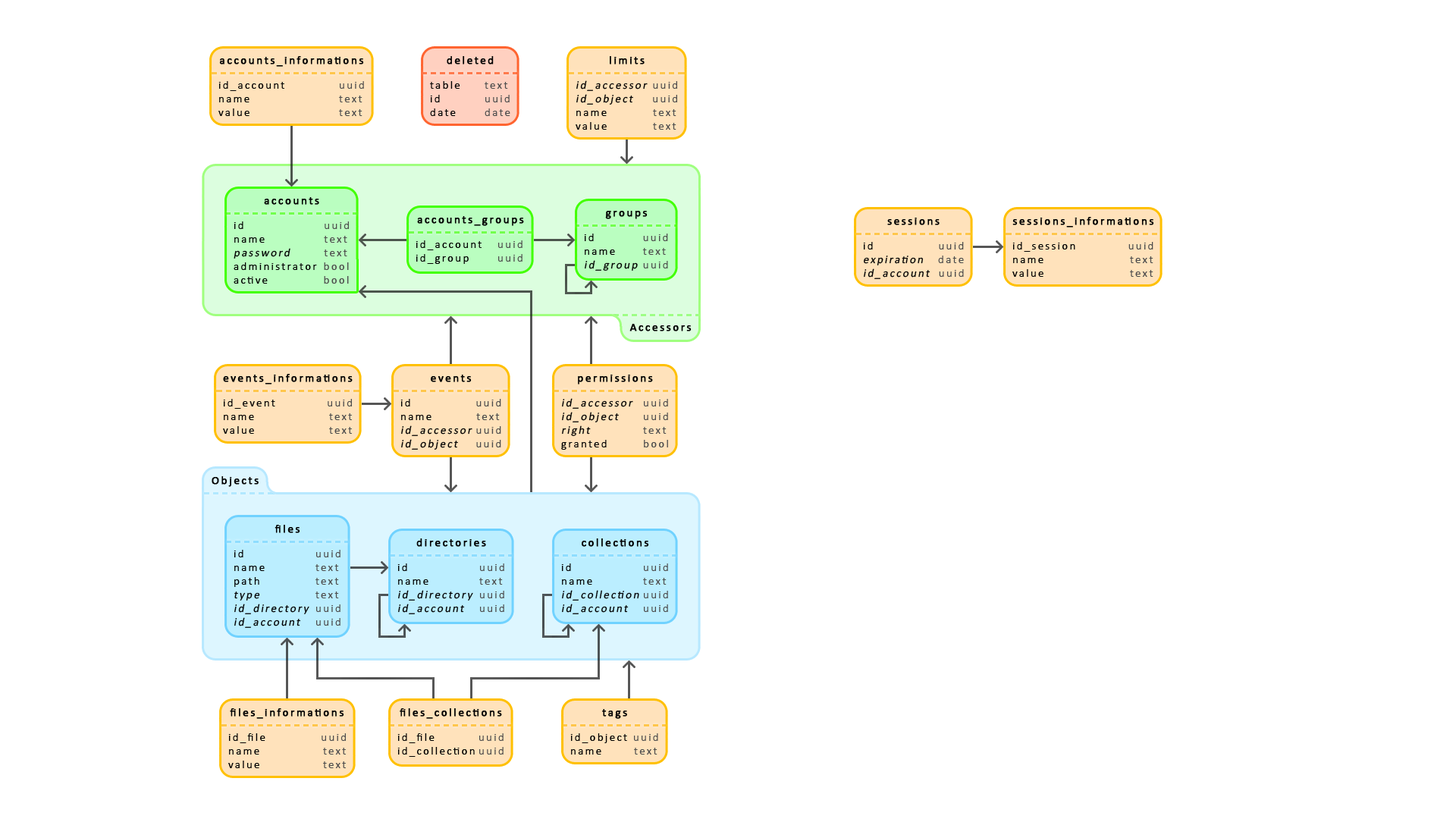
<style>
.page{position:relative;width:1456px;height:819px;background:#ffffff}
.page>*{position:absolute;margin:0}
.t1{font:11.4px "Calibri";letter-spacing:0.15em;color:#000000;font-weight:bold}
.t2{font:11.4px "Calibri";letter-spacing:0.15em;color:#000000}
.t3{font:11.4px "Calibri";letter-spacing:0.15em;color:#4d4d4d}
.t4{font:11.4px "Calibri";letter-spacing:0.15em;color:#000000;font-style:italic}
</style>
<div class="page">
<p class="t1" style="left:219px;top:56px;width:145px;height:11px">accounts_informations</p>
<p class="t1" style="left:447px;top:56px;width:47px;height:8px">deleted</p>
<p class="t1" style="left:610px;top:56px;width:35px;height:8px">limits</p>
<p class="t2" style="left:218px;top:81px;width:146px;height:35px">id_account     <span class="t3">uuid<br></span>name      <span class="t3">text<br></span>value      <span class="t3">text</span></p>
<p class="t2" style="left:430px;top:81px;width:80px;height:35px">table <span class="t3">text<br></span>id  <span class="t3">uuid<br></span>date <span class="t3">date</span></p>
<p class="t4" style="left:576px;top:80px;width:101px;height:50px">id_accessor <span class="t3">uuid<br></span>id_object    <span class="t3">uuid<br></span><span class="t2">name       </span><span class="t3">text<br></span><span class="t2">value       </span><span class="t3">text</span></p>
<p class="t1" style="left:264px;top:197px;width:55px;height:8px">accounts</p>
<p class="t2" style="left:234px;top:221px;width:115px;height:63px">id     <span class="t3">uuid<br></span>name    <span class="t3">text<br></span><span class="t4">password   </span><span class="t3">text<br></span>administrator  <span class="t3">bool<br></span>active     <span class="t3">bool</span></p>
<p class="t1" style="left:417px;top:216px;width:107px;height:10px">accounts_groups</p>
<p class="t1" style="left:605px;top:211px;width:43px;height:8px">groups</p>
<p class="t1" style="left:887px;top:218px;width:53px;height:7px">sessions</p>
<p class="t1" style="left:1012px;top:217px;width:142px;height:10px">sessions_informations</p>
<p class="t4" style="left:584px;top:234px;width:84px;height:37px"><span class="t2">id   </span><span class="t3">uuid<br></span><span class="t2">name  </span><span class="t3">text<br></span>id_group <span class="t3">uuid</span></p>
<p class="t2" style="left:416px;top:240px;width:106px;height:24px">id_account <span class="t3">uuid<br></span>id_group <span class="t3">uuid</span></p>
<p class="t4" style="left:863px;top:242px;width:101px;height:37px"><span class="t2">id       </span><span class="t3">uuid<br></span>expiration    <span class="t3">date<br></span>id_account   <span class="t3">uuid</span></p>
<p class="t2" style="left:1012px;top:242px;width:141px;height:35px">id_session      <span class="t3">uuid<br></span>name            <span class="t3">text<br></span>value            <span class="t3">text</span></p>
<p class="t1" style="left:629px;top:324px;width:63px;height:7px">Accessors</p>
<p class="t1" style="left:223px;top:374px;width:130px;height:10px">events_informations</p>
<p class="t1" style="left:431px;top:375px;width:41px;height:7px">events</p>
<p class="t1" style="left:578px;top:375px;width:75px;height:9px">permissions</p>
<p class="t2" style="left:223px;top:399px;width:129px;height:35px">id_event        <span class="t3">uuid<br></span>name        <span class="t3">text<br></span>value        <span class="t3">text</span></p>
<p class="t4" style="left:400px;top:399px;width:101px;height:51px"><span class="t2">id       </span><span class="t3">uuid<br></span><span class="t2">name      </span><span class="t3">text<br></span>id_accessor <span class="t3">uuid<br></span>id_object    <span class="t3">uuid</span></p>
<p class="t4" style="left:561px;top:398px;width:107px;height:52px">id_accessor <span class="t3">uuid<br></span>id_object <span class="t3">uuid<br></span>right  <span class="t3">text<br></span><span class="t2">granted  </span><span class="t3">bool</span></p>
<p class="t1" style="left:212px;top:476px;width:47px;height:11px">Objects</p>
<p class="t1" style="left:275px;top:525px;width:25px;height:8px">files</p>
<p class="t1" style="left:416px;top:538px;width:70px;height:9px">directories</p>
<p class="t1" style="left:582px;top:538px;width:67px;height:9px">collections</p>
<p class="t4" style="left:234px;top:550px;width:106px;height:78px"><span class="t2">id   </span><span class="t3">uuid<br></span><span class="t2">name  </span><span class="t3">text<br></span><span class="t2">path  </span><span class="t3">text<br></span>type  <span class="t3">text<br></span>id_directory <span class="t3">uuid<br></span>id_account <span class="t3">uuid</span></p>
<p class="t4" style="left:397px;top:563px;width:107px;height:51px"><span class="t2">id   </span><span class="t3">uuid<br></span><span class="t2">name  </span><span class="t3">text<br></span>id_directory <span class="t3">uuid<br></span>id_account <span class="t3">uuid</span></p>
<p class="t4" style="left:561px;top:563px;width:107px;height:51px"><span class="t2">id   </span><span class="t3">uuid<br></span><span class="t2">name  </span><span class="t3">text<br></span>id_collection <span class="t3">uuid<br></span>id_account <span class="t3">uuid</span></p>
<p class="t1" style="left:230px;top:708px;width:114px;height:11px">files_informations</p>
<p class="t1" style="left:400px;top:708px;width:102px;height:11px">files_collections</p>
<p class="t1" style="left:602px;top:709px;width:25px;height:10px">tags</p>
<p class="t2" style="left:228px;top:733px;width:118px;height:35px">id_file     <span class="t3">uuid<br></span>name     <span class="t3">text<br></span>value     <span class="t3">text</span></p>
<p class="t2" style="left:397px;top:733px;width:107px;height:24px">id_file        <span class="t3">uuid<br></span>id_collection <span class="t3">uuid</span></p>
<p class="t2" style="left:570px;top:733px;width:88px;height:22px">id_object <span class="t3">uuid<br></span>name    <span class="t3">text</span></p>
</div>
